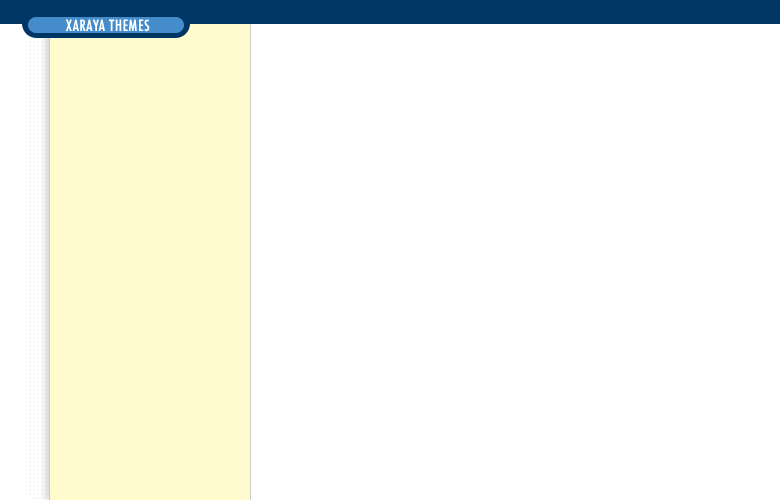
<style>
.page{position:relative;width:780px;height:500px;background:#ffffff}
.page>*{position:absolute;margin:0}
.t1{font:15px "Futura-CondensedMedium";letter-spacing:0.05em;color:#ffffff}
</style>
<div class="page">
<p class="t1" style="left:65px;top:19px;width:85px;height:13px">XARAYA THEMES</p>
</div>
